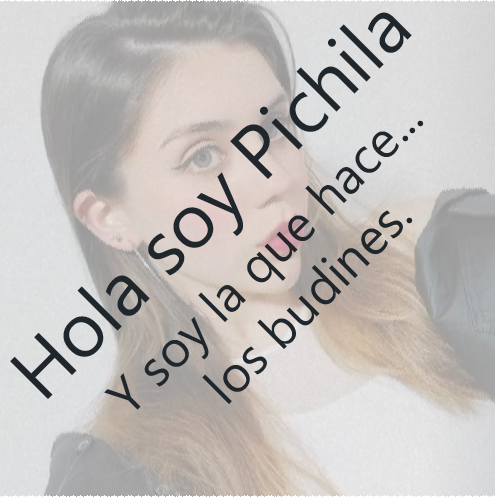
<style>
.page{position:relative;width:495px;height:497px}
.page>*{position:absolute;margin:0}
.t1{font:76.2px "SegoeUIHistoric";color:#20272c}
.t2{font:50.8px "SegoeUIHistoric";color:#20272c}
</style>
<div class="page">
<p class="t1" style="left:10px;top:12px;width:402px;height:387px;rotate:-45deg">Hola soy Pichila</p>
<p class="t2" style="left:104px;top:120px;width:320px;height:290px;text-align:center;rotate:-45deg">Y soy la que hace...<br>los budines.</p>
</div>
